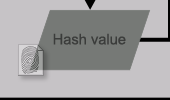
<style>
.page{position:relative;width:170px;height:100px;background:#c6c3c6}
.page>*{position:absolute;margin:0}
.t1{font:14.7px "ArialMT";color:#3b3c3b}
</style>
<div class="page">
<p class="t1" style="left:53px;top:33px;width:73px;height:12px">Hash value</p>
</div>
